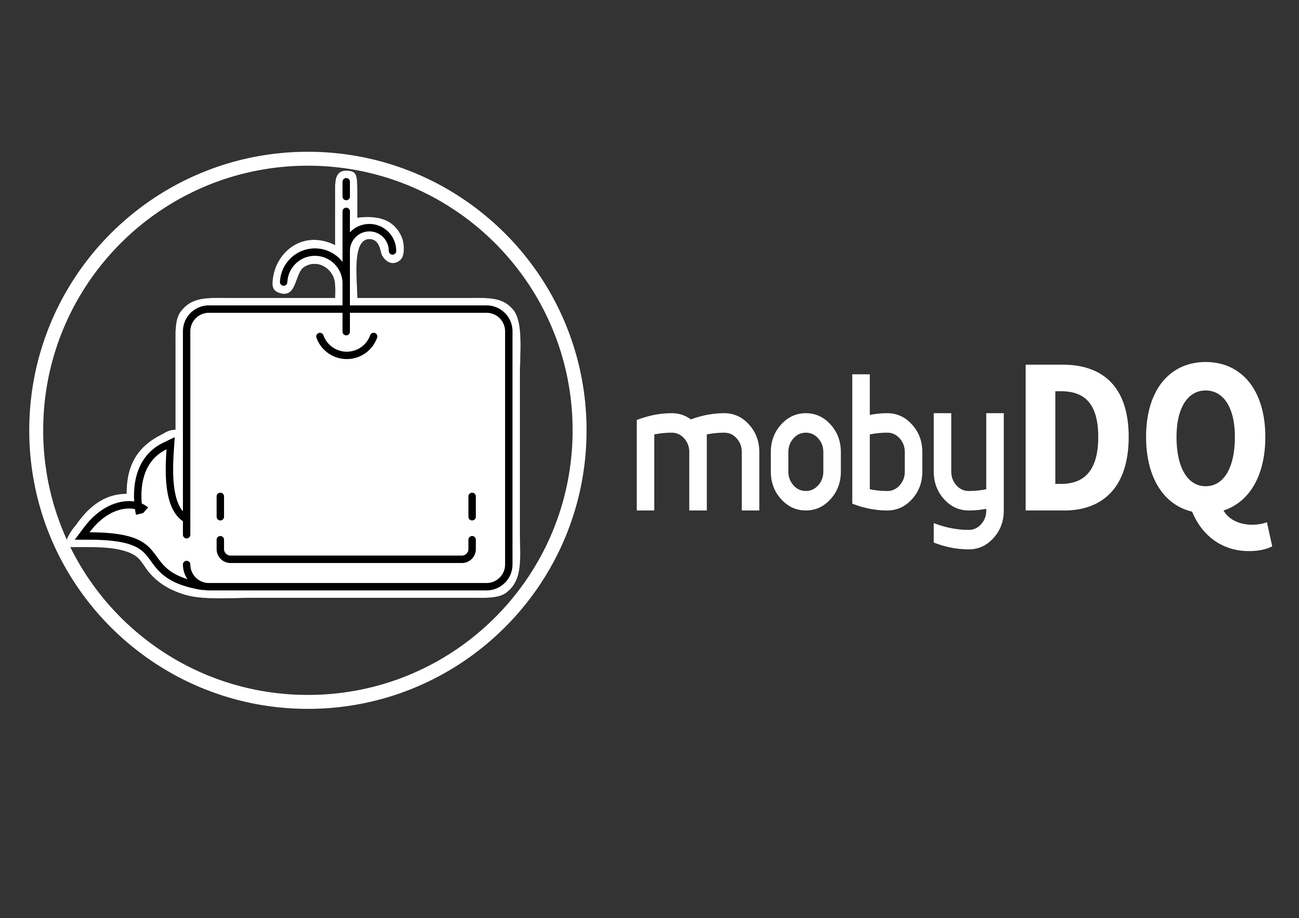
<style>
.page{position:relative;width:1299px;height:918px;background:#333333}
.page>*{position:absolute;margin:0}
.t1{font:199px "Bogotana";letter-spacing:0.005em;color:#ffffff;scale:0.9 1}
.t2{font:223.7px "SourceSansRoman-Bold";letter-spacing:-0.005em;color:#ffffff;font-weight:bold;scale:0.9 1}
</style>
<div class="page">
<p class="t1" style="left:636px;top:362px;width:636px;height:189px">moby<span class="t2">DQ</span></p>
</div>
